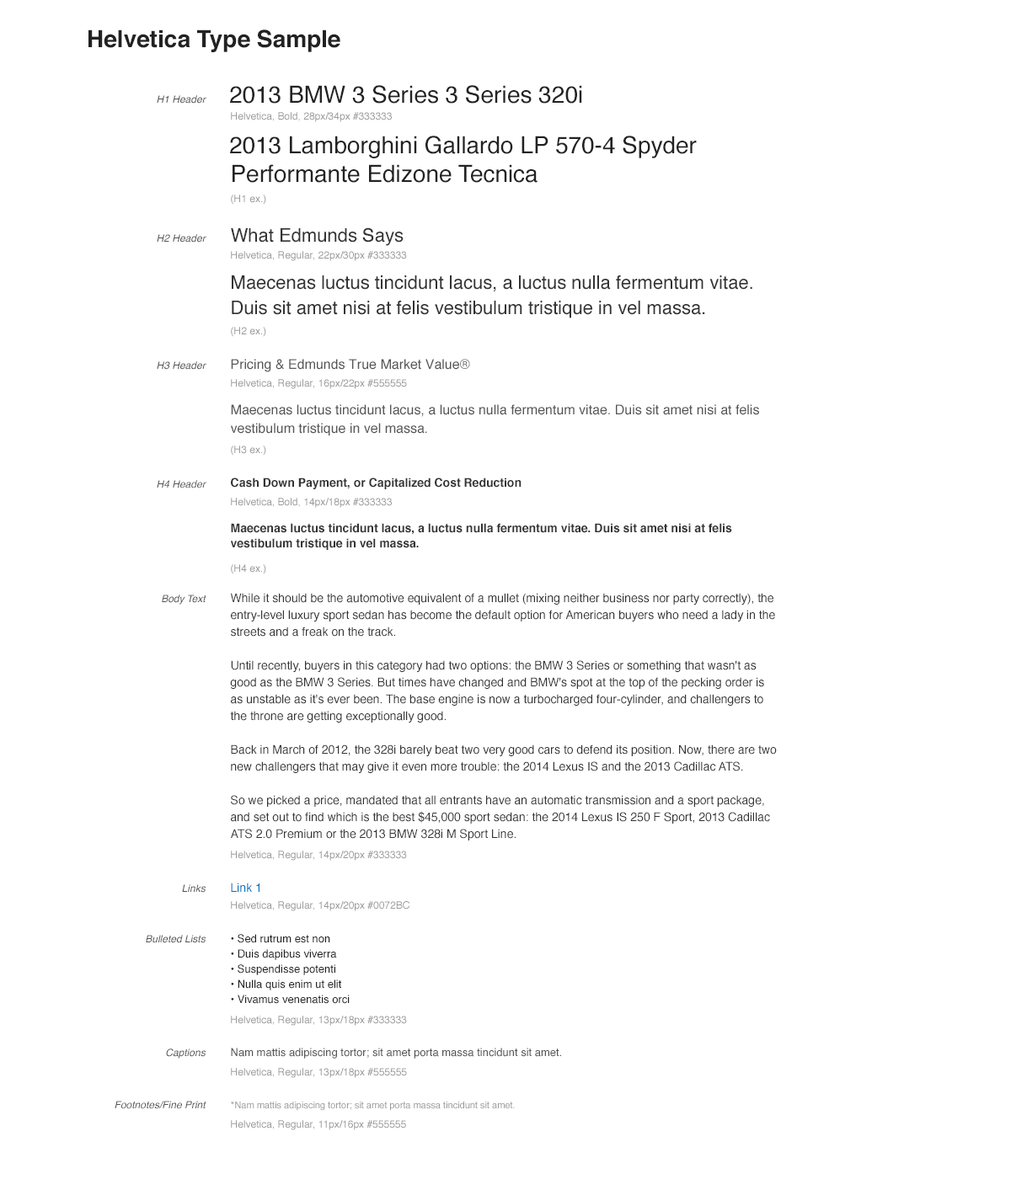
<style>
.page{position:relative;width:1011px;height:1179px;background:#ffffff}
.page>*{position:absolute;margin:0}
.t1{font:23.6px "Helvetica-Bold";color:#222222}
.t2{font:23.6px "Helvetica";color:#222222}
.t3{font:10.1px "Helvetica-Oblique";color:#555555}
.t4{font:10.1px "Helvetica";color:#999999}
.t5{font:23.6px/28.6px "Helvetica";color:#222222}
.t6{font:18.5px "Helvetica";color:#333333}
.t7{font:18.5px/25.3px "Helvetica";color:#333333}
.t8{font:13.5px "Helvetica";color:#555555}
.t9{font:13.5px/18.5px "Helvetica";color:#555555}
.t10{font:11.8px "Helvetica-Bold";color:#333333}
.t11{font:11.8px/15.2px "Helvetica-Bold";color:#333333}
.t12{font:11.8px/16.8px "Helvetica";color:#333333}
.t13{font:11.8px "Helvetica";color:#0072bc}
.t14{font:11px/15.2px "Helvetica";color:#222222}
.t15{font:11px "Helvetica";color:#555555}
.t16{font:9.3px "Helvetica";color:#999999}
</style>
<div class="page">
<p class="t1" style="left:88px;top:29px;width:252px;height:23px">Helvetica Type Sample</p>
<p class="t2" style="left:230px;top:85px;width:352px;height:19px">2013 BMW 3 Series 3 Series 320i</p>
<p class="t3" style="left:157px;top:95px;width:49px;height:9px">H1 Header</p>
<p class="t4" style="left:231px;top:112px;width:161px;height:10px">Helvetica, Bold, 28px/34px #333333</p>
<p class="t5" style="left:230px;top:136px;width:467px;height:47px">2013 Lamborghini Gallardo LP 570-4 Spyder Performante Edizone Tecnica</p>
<p class="t4" style="left:231px;top:195px;width:35px;height:10px">(H1 ex.)</p>
<p class="t6" style="left:231px;top:227px;width:173px;height:19px">What Edmunds Says</p>
<p class="t3" style="left:157px;top:234px;width:49px;height:9px">H2 Header</p>
<p class="t4" style="left:231px;top:251px;width:176px;height:10px">Helvetica, Regular, 22px/30px #333333</p>
<p class="t7" style="left:232px;top:275px;width:520px;height:43px">Maecenas luctus tincidunt lacus, a luctus nulla fermentum vitae. Duis sit amet nisi at felis vestibulum tristique in vel massa.</p>
<p class="t4" style="left:231px;top:327px;width:35px;height:10px">(H2 ex.)</p>
<p class="t3" style="left:157px;top:361px;width:49px;height:9px">H3 Header</p>
<p class="t8" style="left:231px;top:359px;width:239px;height:13px">Pricing &amp; Edmunds True Market Value®</p>
<p class="t4" style="left:231px;top:379px;width:176px;height:10px">Helvetica, Regular, 16px/22px #555555</p>
<p class="t9" style="left:231px;top:404px;width:528px;height:32px">Maecenas luctus tincidunt lacus, a luctus nulla fermentum vitae. Duis sit amet nisi at felis vestibulum tristique in vel massa.</p>
<p class="t4" style="left:231px;top:446px;width:35px;height:10px">(H3 ex.)</p>
<p class="t3" style="left:157px;top:480px;width:49px;height:9px">H4 Header</p>
<p class="t10" style="left:231px;top:478px;width:290px;height:11px">Cash Down Payment, or Capitalized Cost Reduction</p>
<p class="t4" style="left:231px;top:498px;width:161px;height:10px">Helvetica, Bold, 14px/18px #333333</p>
<p class="t11" style="left:230px;top:523px;width:502px;height:27px">Maecenas luctus tincidunt lacus, a luctus nulla fermentum vitae. Duis sit amet nisi at felis vestibulum tristique in vel massa.</p>
<p class="t4" style="left:231px;top:564px;width:35px;height:11px">(H4 ex.)</p>
<p class="t12" style="left:230px;top:593px;width:547px;height:248px">While it should be the automotive equivalent of a mullet (mixing neither business nor party correctly), the entry-level luxury sport sedan has become the default option for American buyers who need a lady in the streets and a freak on the track.<br><br>Until recently, buyers in this category had two options: the BMW 3 Series or something that wasn't as good as the BMW 3 Series. But times have changed and BMW's spot at the top of the pecking order is as unstable as it's ever been. The base engine is now a turbocharged four-cylinder, and challengers to the throne are getting exceptionally good.<br><br>Back in March of 2012, the 328i barely beat two very good cars to defend its position. Now, there are two new challengers that may give it even more trouble: the 2014 Lexus IS and the 2013 Cadillac ATS.<br><br>So we picked a price, mandated that all entrants have an automatic transmission and a sport package, and set out to find which is the best $45,000 sport sedan: the 2014 Lexus IS 250 F Sport, 2013 Cadillac ATS 2.0 Premium or the 2013 BMW 328i M Sport Line.</p>
<p class="t3" style="left:162px;top:595px;width:44px;height:10px">Body Text</p>
<p class="t4" style="left:231px;top:851px;width:176px;height:10px">Helvetica, Regular, 14px/20px #333333</p>
<p class="t3" style="left:182px;top:885px;width:24px;height:8px">Links</p>
<p class="t13" style="left:231px;top:883px;width:28px;height:9px">Link 1</p>
<p class="t4" style="left:231px;top:901px;width:178px;height:11px">Helvetica, Regular, 14px/20px #0072BC</p>
<p class="t3" style="left:146px;top:935px;width:60px;height:9px">Bulleted Lists</p>
<p class="t14" style="left:231px;top:934px;width:119px;height:70px">• Sed rutrum est non <br>• Duis dapibus viverra<br>• Suspendisse potenti<br>• Nulla quis enim ut elit<br>• Vivamus venenatis orci</p>
<p class="t4" style="left:231px;top:1016px;width:176px;height:10px">Helvetica, Regular, 13px/18px #333333</p>
<p class="t3" style="left:166px;top:1049px;width:40px;height:10px">Captions</p>
<p class="t15" style="left:231px;top:1048px;width:330px;height:11px">Nam mattis adipiscing tortor; sit amet porta massa tincidunt sit amet.</p>
<p class="t4" style="left:231px;top:1068px;width:176px;height:10px">Helvetica, Regular, 13px/18px #555555</p>
<p class="t3" style="left:115px;top:1101px;width:91px;height:9px">Footnotes/Fine Print</p>
<p class="t16" style="left:231px;top:1102px;width:284px;height:9px">*Nam mattis adipiscing tortor; sit amet porta massa tincidunt sit amet.</p>
<p class="t4" style="left:231px;top:1121px;width:175px;height:10px">Helvetica, Regular, 11px/16px #555555</p>
</div>
